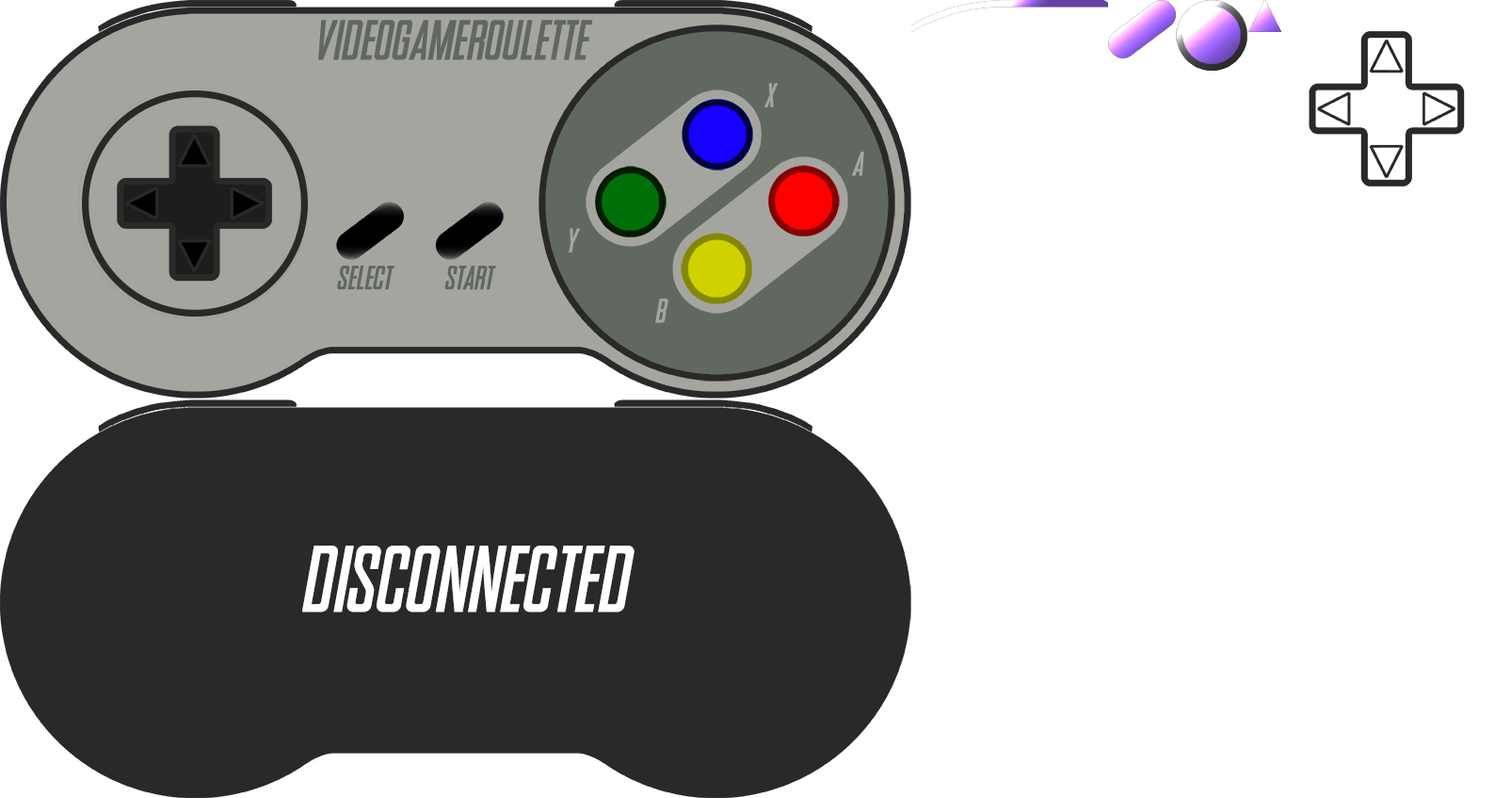
<style>
.page{position:relative;width:1495px;height:798px;background:#ffffff}
.page>*{position:absolute;margin:0}
.t1{font:56.5px "SNES-Italic";color:#616860}
.t2{font:33.9px "SNES-Italic";color:#a5a5a0}
.t3{font:33.9px "SNES-Italic";color:#616860}
.t4{font:94.2px "SNES-Italic";color:#ffffff}
</style>
<div class="page">
<p class="t1" style="left:318px;top:20px;width:275px;height:40px">VideoGameRoulette</p>
<p class="t2" style="left:765px;top:83px;width:14px;height:24px">x</p>
<p class="t2" style="left:852px;top:152px;width:12px;height:24px">a</p>
<p class="t2" style="left:569px;top:228px;width:12px;height:24px">y</p>
<p class="t3" style="left:337px;top:266px;width:58px;height:24px">select</p>
<p class="t3" style="left:444px;top:266px;width:52px;height:24px">start</p>
<p class="t2" style="left:655px;top:298px;width:14px;height:25px">b</p>
<p class="t4" style="left:302px;top:545px;width:333px;height:67px">Disconnected</p>
</div>
